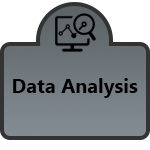
<style>
.page{position:relative;width:150px;height:150px;background:#ffffff}
.page>*{position:absolute;margin:0}
.t1{font:20px "Gadugi-Bold";color:#000000}
</style>
<div class="page">
<p class="t1" style="left:13px;top:78px;width:125px;height:20px">Data Analysis</p>
</div>
